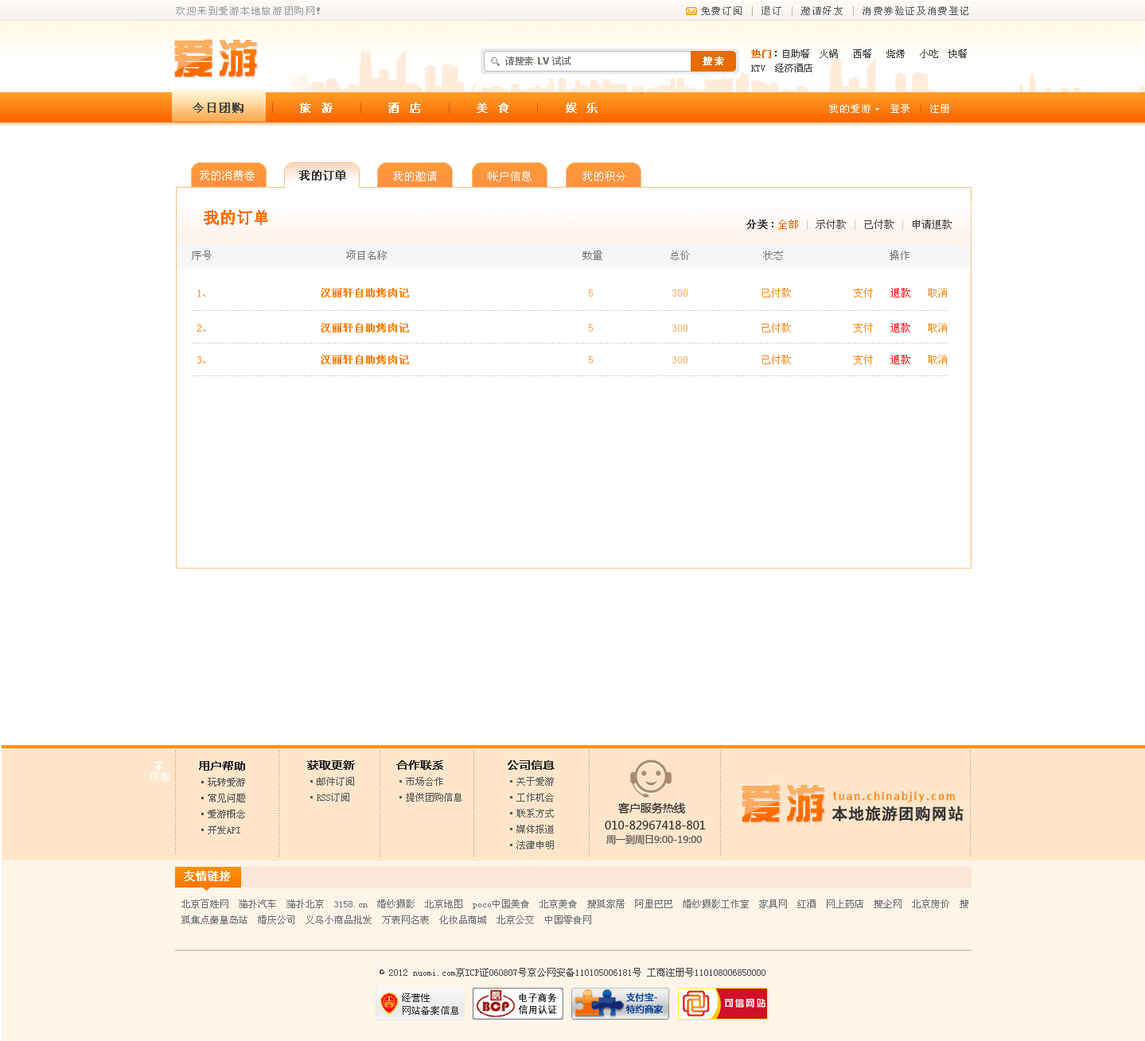
<style>
.page{position:relative;width:1145px;height:1041px;background:#ffffff}
.page>*{position:absolute;margin:0}
.t1{font:9.5px "SimSun";letter-spacing:0.13em;color:#9c9c9c}
.t2{font:9.5px "SimSun";letter-spacing:0.13em;color:#5c5c5c}
.t3{font:9.5px "SimSun";letter-spacing:0.13em;color:#b8b8b8}
.t4{font:41.5px "FZZYJW--GB1-0";letter-spacing:0.13em}
.t5{font:9.5px/14.3px "SimSun";color:#3b3b3b}
.t6{font:9.5px/14.3px "SimSun";color:#e86b00;font-weight:bold}
.t7{font:9.5px/14.3px "SimSun";color:#000000}
.t8{font:11.1px "SimSun";letter-spacing:0.13em;color:#454545;font-weight:bold}
.t9{font:11.1px "SimSun";letter-spacing:0.13em;color:#cb6105}
.t10{font:11.1px "SimSun";letter-spacing:0.13em;color:#ffffff;font-weight:bold}
.t11{font:9.5px "SimSun";letter-spacing:0.13em;color:#ffffff}
.t12{font:9.5px "SimSun";letter-spacing:0.13em;color:#d56401}
.t13{font:11.1px "SimSun";color:#ffffff}
.t14{font:11.1px "SimSun";color:#3e3e3e;font-weight:bold}
.t15{font:11.1px "SimSun";color:#fefefe}
.t16{font:15.9px "SimSun";color:#ff6c00;font-weight:bold}
.t17{font:10.3px "SimSun";color:#3b3b3b}
.t18{font:10.3px "SimSun";color:#3b3b3b;font-weight:bold}
.t19{font:9.5px "SimSun";color:#3b3b3b}
.t20{font:10.3px "SimSun";color:#e95d00}
.t21{font:10.3px "SimSun";color:#cbcbcb}
.t22{font:10.3px "SimSun";color:#cacaca}
.t23{font:10.3px "SimSun";color:#cccccc}
.t24{font:10.3px "SimSun";color:#757575}
.t25{font:10.3px "SimSun";color:#fca654}
.t26{font:10.3px "SimSun";color:#fd830e;font-weight:bold}
.t27{font:10.3px "SimSun";color:#fd830e}
.t28{font:10.3px "SimSun";color:#ff0000}
.t29{font:4.8px "SimSun";color:#acacac}
.t30{font:4.8px/15.9px "SimSun";color:#b47d41}
.t31{font:9.5px/15.9px "SimSun";letter-spacing:0.01em;color:#515151}
.t32{font:11.1px/15.9px "MicrosoftYaHei";letter-spacing:0.01em;color:#282727;font-weight:bold}
.t33{font:9.5px/15.9px "SimSun";letter-spacing:0.01em;color:#575757}
.t34{font:18px "LilyUPC";letter-spacing:0.13em;color:#fe8c1b;scale:0.93 1}
.t35{font:11.1px "MicrosoftYaHei";color:#282727}
.t36{font:16px "SimHei";letter-spacing:0.01em;color:#323232;font-weight:bold}
.t37{font:9.5px "MicrosoftYaHei";color:#565656}
.t38{font:11.1px "SimSun";color:#ffffff;font-weight:bold}
.t39{font:9.5px/15.9px "SimSun";color:#6c6c6c}
.t40{font:9.5px "SimSun";color:#444444}
</style>
<div class="page">
<p class="t1" style="left:176px;top:6px;width:144px;height:9px">欢迎来到爱游本地旅游团购网！</p>
<p class="t2" style="left:701px;top:6px;width:267px;height:10px">免费订阅 <span class="t3">|</span> 退订 <span class="t3">|</span> 邀请好友 <span class="t3">|</span> 消费券验证及消费登记</p>
<p class="t4" style="left:174px;top:39px;width:83px;height:38px">爱游</p>
<p class="t5" style="left:751px;top:49px;width:216px;height:23px"><span class="t6">热门</span><span class="t7">：</span>自助餐  火锅   西餐   烧烤   小吃  快餐  KTV  经济酒店</p>
<p class="t8" style="left:193px;top:103px;width:405px;height:11px">今日团购   <span class="t9">|</span><span class="t10">   旅 游   </span><span class="t9">|</span><span class="t10">   酒 店   </span><span class="t9">|</span><span class="t10">   美 食   </span><span class="t9">|</span><span class="t10">   娱 乐</span></p>
<p class="t11" style="left:829px;top:104px;width:120px;height:10px">我的爱游   登录 <span class="t12">| </span>注册</p>
<p class="t13" style="left:200px;top:170px;width:55px;height:11px">我的消费卷</p>
<p class="t14" style="left:299px;top:170px;width:47px;height:11px">我的订单</p>
<p class="t15" style="left:393px;top:171px;width:233px;height:10px">我的邀请         帐户信息         我的积分</p>
<p class="t16" style="left:204px;top:210px;width:64px;height:15px">我的订单</p>
<p class="t17" style="left:746px;top:220px;width:206px;height:10px"><span class="t18">分类</span><span class="t19">：</span><span class="t20">全部 </span><span class="t21">|</span> 示付款 <span class="t22">|</span> 已付款 <span class="t23">|</span> 申请退款</p>
<p class="t24" style="left:192px;top:251px;width:717px;height:9px">序号                        项目名称                                   数量            总价             状态                   操作</p>
<p class="t25" style="left:198px;top:288px;width:749px;height:10px"><span class="t26"> </span><span class="t27">1、</span><span class="t26">                 汉丽轩自助烤肉记                                </span>5              300<span class="t27">             已付款           支付   </span><span class="t28">退款</span><span class="t27">   取消</span></p>
<p class="t29" style="left:192px;top:310px;width:755px;height:1px">.............................................................................................................................................................................................................................................................................................................................</p>
<p class="t25" style="left:197px;top:323px;width:750px;height:10px"><span class="t26"> </span><span class="t27">2、</span><span class="t26">                 汉丽轩自助烤肉记                                </span>5              300<span class="t27">             已付款           支付   </span><span class="t28">退款</span><span class="t27">   取消</span></p>
<p class="t29" style="left:192px;top:343px;width:755px;height:1px">.............................................................................................................................................................................................................................................................................................................................</p>
<p class="t25" style="left:197px;top:355px;width:750px;height:9px"><span class="t26"> </span><span class="t27">3、</span><span class="t26">                 汉丽轩自助烤肉记                                </span>5              300<span class="t27">             已付款           支付   </span><span class="t28">退款</span><span class="t27">   取消</span></p>
<p class="t29" style="left:192px;top:376px;width:755px;height:0px">.............................................................................................................................................................................................................................................................................................................................</p>
<p class="t30" style="left:175px;top:751px;width:1px;height:104px">............................................</p>
<p class="t31" style="left:199px;top:761px;width:46px;height:74px"><span class="t32">用户帮助<br></span>·玩转爱游 <br>·常见问题 <br>·爱游概念 <br>·开发API</p>
<p class="t30" style="left:278px;top:751px;width:1px;height:106px">.............................................</p>
<p class="t33" style="left:307px;top:761px;width:48px;height:41px"><span class="t32">获取更新<br></span>·邮件订阅 <br>·RSS订阅</p>
<p class="t30" style="left:380px;top:751px;width:0px;height:106px">.............................................</p>
<p class="t33" style="left:396px;top:761px;width:66px;height:41px"><span class="t32">合作联系<br></span>·市场合作<br>·提供团购信息</p>
<p class="t30" style="left:473px;top:751px;width:1px;height:106px">.............................................</p>
<p class="t33" style="left:508px;top:761px;width:47px;height:89px"><span class="t32">公司信息<br></span>·关于爱游 <br>·工作机会 <br>·联系方式<br>·媒体报道<br>·法律申明</p>
<p class="t30" style="left:589px;top:751px;width:1px;height:106px">.............................................</p>
<p class="t30" style="left:720px;top:750px;width:1px;height:106px">.............................................</p>
<p class="t30" style="left:970px;top:751px;width:1px;height:106px">.............................................</p>
<p class="t11" style="left:150px;top:773px;width:19px;height:8px">顶部</p>
<p class="t4" style="left:742px;top:785px;width:82px;height:38px">爱游</p>
<p class="t34" style="left:832px;top:792px;width:123px;height:11px">tuan.chinabjly.com</p>
<p class="t35" style="left:618px;top:803px;width:67px;height:11px">客户服务热线</p>
<p class="t36" style="left:831px;top:806px;width:133px;height:16px">本地旅游团购网站</p>
<p class="t35" style="left:605px;top:821px;width:101px;height:9px">010-82967418-801</p>
<p class="t37" style="left:606px;top:835px;width:96px;height:10px">周一到周日9:00-19:00</p>
<p class="t38" style="left:184px;top:871px;width:47px;height:11px">友情链接</p>
<p class="t39" style="left:181px;top:900px;width:787px;height:25px">北京百姓网  猫扑汽车  猫扑北京  3158.cn  婚纱摄影  北京地图  poco中国美食  北京美食  搜狐家居  阿里巴巴  婚纱摄影工作室  家具网  红酒  网上药店  搜企网  北京房价  搜狐焦点秦皇岛站  婚庆公司  义乌小商品批发  万表网名表  化妆品商城  北京公交  中国零食网</p>
<p class="t40" style="left:380px;top:968px;width:385px;height:9px">© 2012 nuomi.com京ICP证060807号京公网安备110105006181号 工商注册号110108006850000</p>
</div>
